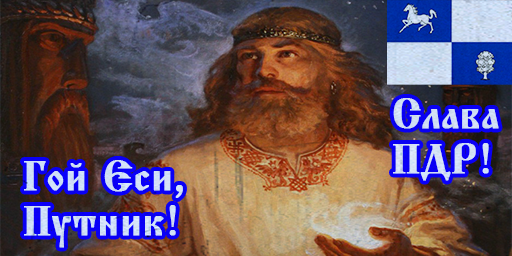
<style>
.page{position:relative;width:512px;height:256px}
.page>*{position:absolute;margin:0}
.t1{font:44px/44.8px "CyrillicaBulgarian10UNormal";color:#d2dff4;font-weight:bold}
.t2{font:44px/44.8px "CyrillicaBulgarian10UNormal";color:#d0e1f6;font-weight:bold}
</style>
<div class="page">
<p class="t1" style="left:393px;top:98px;width:106px;height:83px">Слава<br>ПДР!</p>
<p class="t2" style="left:24px;top:160px;width:159px;height:88px">Гой Еси,<br>Путник!</p>
</div>
